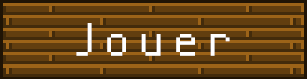
<style>
.page{position:relative;width:307px;height:79px;background:#623e0f}
.page>*{position:absolute;margin:0}
.t1{font:58.2px "Nine-By-Five-NBP";letter-spacing:0.2em;color:#ffffff;scale:1.03 1}
</style>
<div class="page">
<p class="t1" style="left:76px;top:23px;width:154px;height:33px">Jouer</p>
</div>
